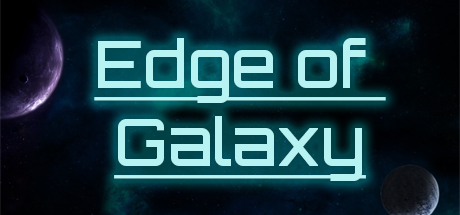
<style>
.page{position:relative;width:460px;height:215px}
.page>*{position:absolute;margin:0}
.t1{font:65px "Orbitron-Medium";color:#b8f3f4;text-decoration:underline}
</style>
<div class="page">
<p class="t1" style="left:94px;top:38px;width:292px;height:143px;text-align:center">Edge of <br>Galaxy</p>
</div>
